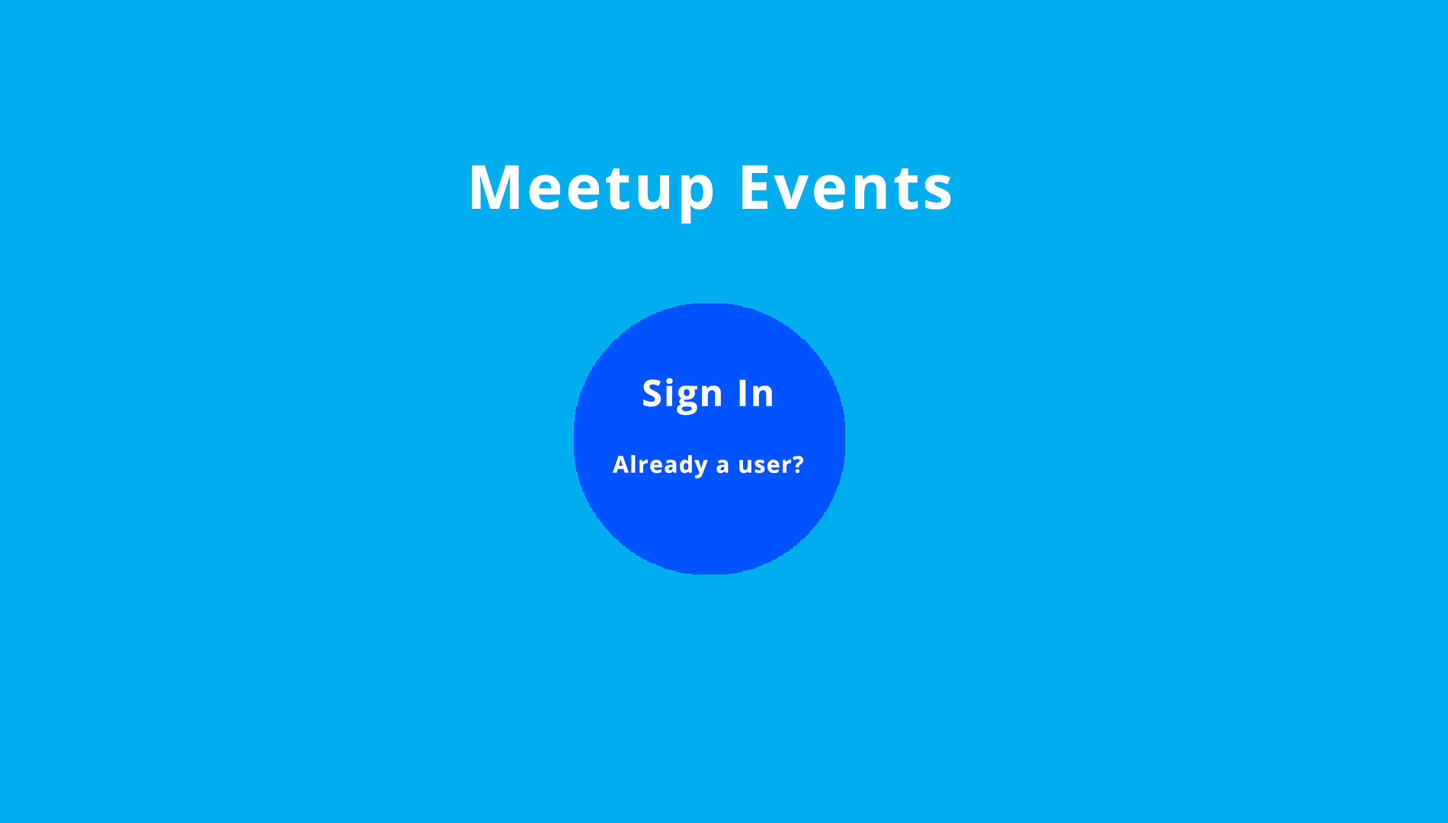
<style>
.page{position:relative;width:1448px;height:823px;background:#00aeef}
.page>*{position:absolute;margin:0}
.t1{font:60.7px "OpenSans-Bold";letter-spacing:0.05em;color:#ffffff}
.t2{font:36.6px "OpenSans-Bold";letter-spacing:0.05em;color:#ffffff}
.t3{font:22.9px "OpenSans-Bold";letter-spacing:0.05em;color:#ffffff}
</style>
<div class="page">
<p class="t1" style="left:472px;top:165px;width:479px;height:59px">Meetup Events</p>
<p class="t2" style="left:643px;top:378px;width:129px;height:37px">Sign In</p>
<p class="t3" style="left:613px;top:455px;width:190px;height:24px">Already a user?</p>
</div>
